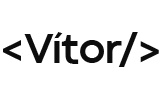
<style>
.page{position:relative;width:160px;height:90px;background:#ffffff}
.page>*{position:absolute;margin:0}
.t1{font:44.4px "CodecColdTrial-Bold";letter-spacing:-0.05em;color:#0d0d0d;scale:0.96 1}
</style>
<div class="page">
<p class="t1" style="left:3px;top:32px;width:156px;height:35px">&lt;Vítor/&gt;</p>
</div>
